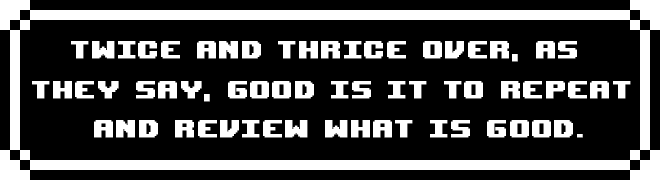
<style>
.page{position:relative;width:660px;height:180px;background:#000000}
.page>*{position:absolute;margin:0}
.t1{font:33px "UpheavalTT-BRK-";letter-spacing:0.05em;color:#ffffff;font-weight:bold}
</style>
<div class="page">
<p class="t1" style="left:32px;top:41px;width:599px;height:97px;text-align:center">Twice and thrice over, as <br>they say, good is it to repeat<br> and review what is good.</p>
</div>
